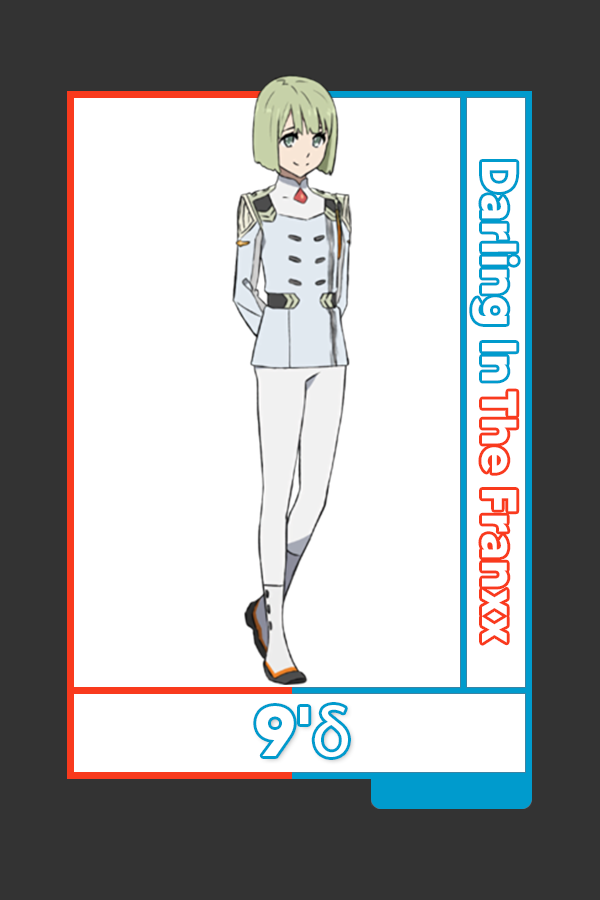
<style>
.page{position:relative;width:600px;height:900px;background:#ffffff}
.page>*{position:absolute;margin:0}
.t1{font:48.8px "MADETOMMY-Bold";color:#ffffff}
.t2{font:70.1px "MADETOMMY-Bold";color:#ffffff}
.t3{font:70.1px "MyriadPro-Regular";color:#ffffff}
</style>
<div class="page">
<p class="t1" style="left:472px;top:162px;width:46px;height:219px;rotate:90deg">Darling In</p>
<p class="t1" style="left:481px;top:391px;width:36px;height:252px;rotate:90deg">The Franxx</p>
<p class="t2" style="left:256px;top:705px;width:92px;height:52px">9'<span class="t3">δ</span></p>
</div>
